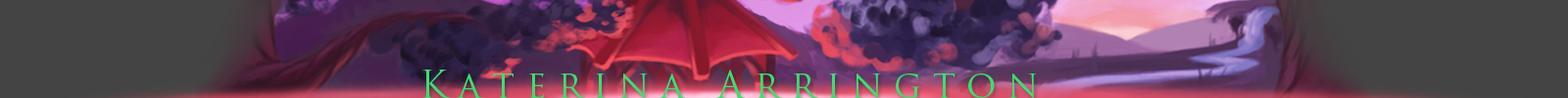
<style>
.page{position:relative;width:1568px;height:98px;background:#444444}
.page>*{position:absolute;margin:0}
.t1{font:36.9px "TrajanPro-Regular";letter-spacing:0.3em;color:#39df70}
</style>
<div class="page">
<p class="t1" style="left:422px;top:70px;width:615px;height:28px">Katerina Arrington</p>
</div>
